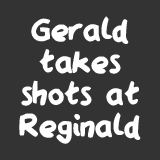
<style>
.page{position:relative;width:160px;height:160px;background:#333333}
.page>*{position:absolute;margin:0}
.t1{font:35.9px/31.9px "QAReports";color:#ffffff}
</style>
<div class="page">
<p class="t1" style="left:19px;top:16px;width:122px;height:128px;text-align:center">Gerald<br>takes<br>shots at<br>Reginald</p>
</div>
